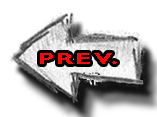
<style>
.page{position:relative;width:157px;height:117px;background:#ffffff}
.page>*{position:absolute;margin:0}
.t1{font:15.8px "GillSansMT-Bold";letter-spacing:0.08em;color:#fc0808;scale:1.6 1}
</style>
<div class="page">
<p class="t1" style="left:40px;top:53px;width:77px;height:11px">PREV.</p>
</div>
